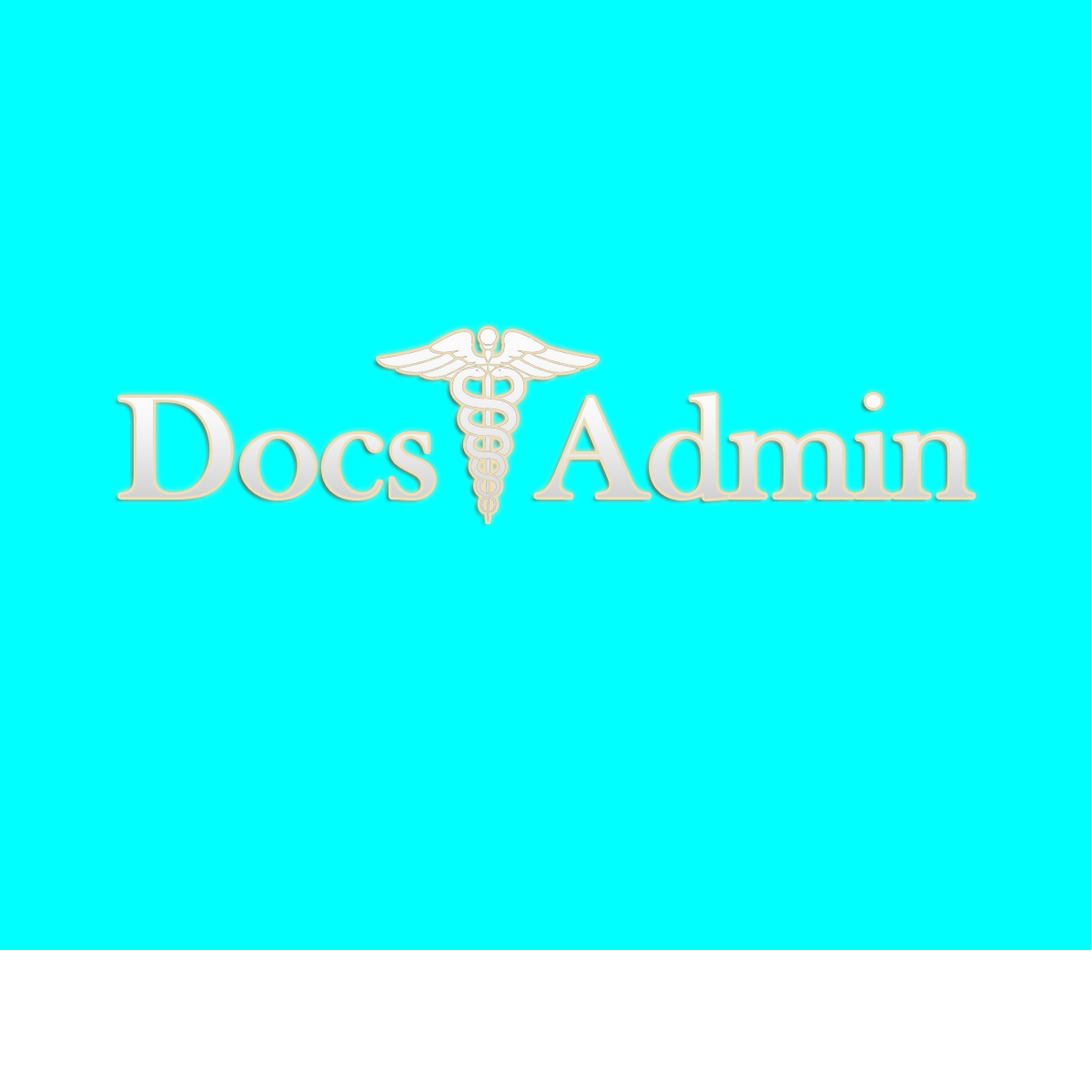
<style>
.page{position:relative;width:1092px;height:1092px;background:#00ffff}
.page>*{position:absolute;margin:0}
.t1{font:149.2px "BaskOldFace";color:#e6e5e5;scale:1.05 1}
.t2{font:149.2px "BaskOldFace";color:#e5e4e4;scale:1.05 1}
</style>
<div class="page">
<p class="t1" style="left:120px;top:398px;width:314px;height:100px">Docs</p>
<p class="t2" style="left:536px;top:395px;width:438px;height:104px">Admin</p>
</div>
